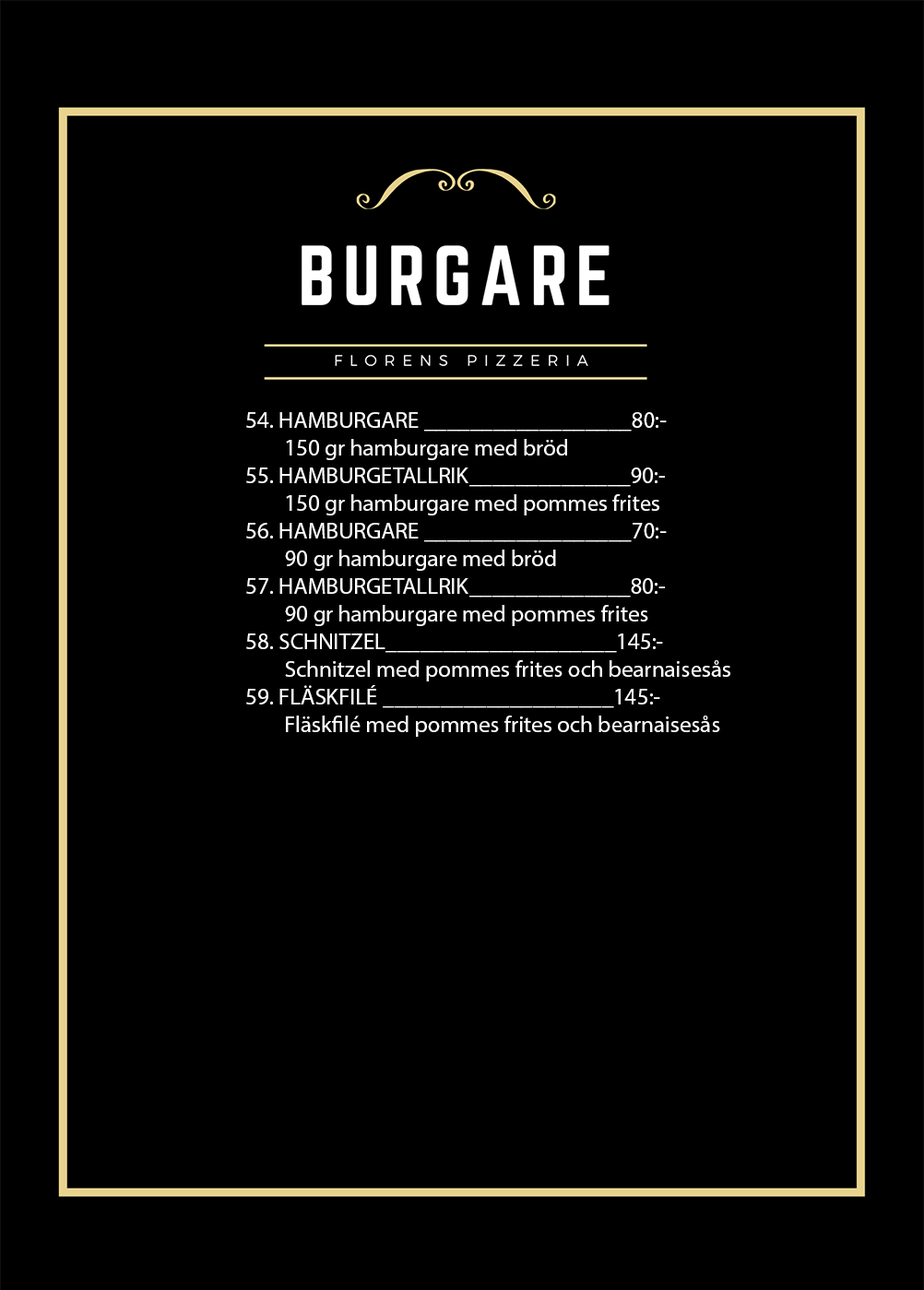
<style>
.page{position:relative;width:924px;height:1290px;background:#000000}
.page>*{position:absolute;margin:0}
.t1{font:23.1px "MyriadPro-Regular";color:#ffffff}
</style>
<div class="page">
<p class="t1" style="left:246px;top:412px;width:484px;height:325px">54. HAMBURGARE __________________80:-<br>        150 gr hamburgare med bröd<br>55. HAMBURGETALLRIK______________90:-<br>        150 gr hamburgare med pommes frites<br>56. HAMBURGARE __________________70:-<br>        90 gr hamburgare med bröd<br>57. HAMBURGETALLRIK______________80:-<br>        90 gr hamburgare med pommes frites<br>58. SCHNITZEL____________________145:-<br>        Schnitzel med pommes frites och bearnaisesås <br>59. FLÄSKFILÉ ____________________145:-<br>        Fläskfilé med pommes frites och bearnaisesås</p>
</div>
